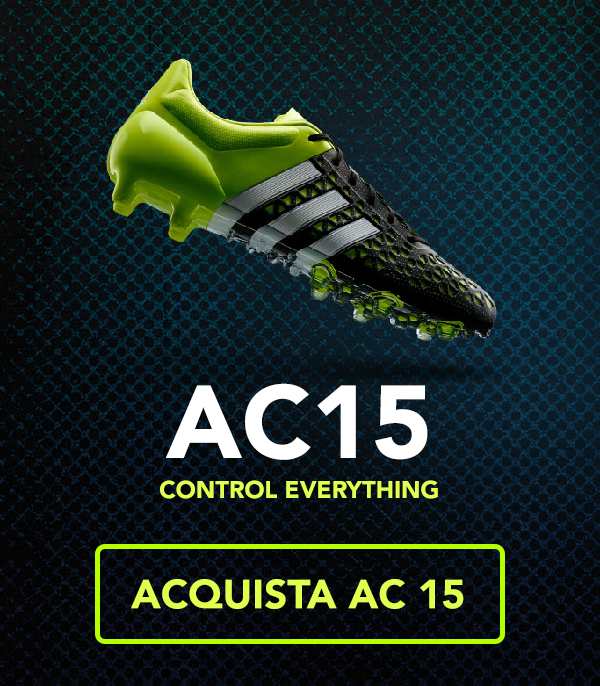
<style>
.page{position:relative;width:600px;height:686px}
.page>*{position:absolute;margin:0}
.t1{font:24px/40px "Avenir-Black";color:#e2fe4f;text-transform:uppercase}
.t2{font:102px/40px "Avenir-Black";color:#ffffff;text-transform:uppercase}
.t3{font:40.2px "Avenir-Black";color:#e2fe4f;text-transform:uppercase}
</style>
<div class="page">
<p class="t1" style="left:160px;top:383px;width:278px;height:116px;text-align:center"><span class="t2">AC15<br></span>CONTROL EVERYTHING</p>
<p class="t3" style="left:131px;top:579px;width:333px;height:30px">ACQUISTA AC 15</p>
</div>
